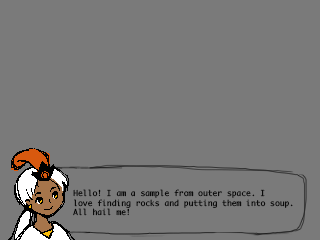
<style>
.page{position:relative;width:320px;height:240px;background:#7a7a7a}
.page>*{position:absolute;margin:0}
.t1{font:8px "Monaco";color:#000000}
</style>
<div class="page">
<p class="t1" style="left:73px;top:189px;width:220px;height:27px">Hello! I am a sample from outer space. I <br>love finding rocks and putting them into soup.<br>All hail me!</p>
</div>
